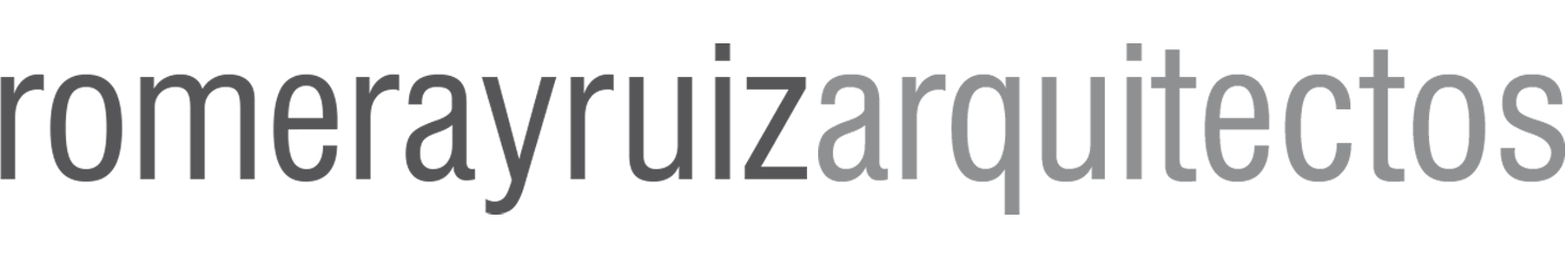
<style>
.page{position:relative;width:1568px;height:257px;background:#ffffff}
.page>*{position:absolute;margin:0}
.t1{font:181.4px "Swiss721BT-RomanCondensed";color:#565659}
.t2{font:181.4px "Swiss721BT-RomanCondensed";letter-spacing:0.036em;color:#565659}
.t3{font:181.4px "Swiss721BT-RomanCondensed";color:#8e9092}
</style>
<div class="page">
<p class="t1" style="left:0px;top:43px;width:807px;height:172px">romeray<span class="t2">r</span>uiz</p>
<p class="t3" style="left:818px;top:43px;width:747px;height:172px">arquitectos</p>
</div>
